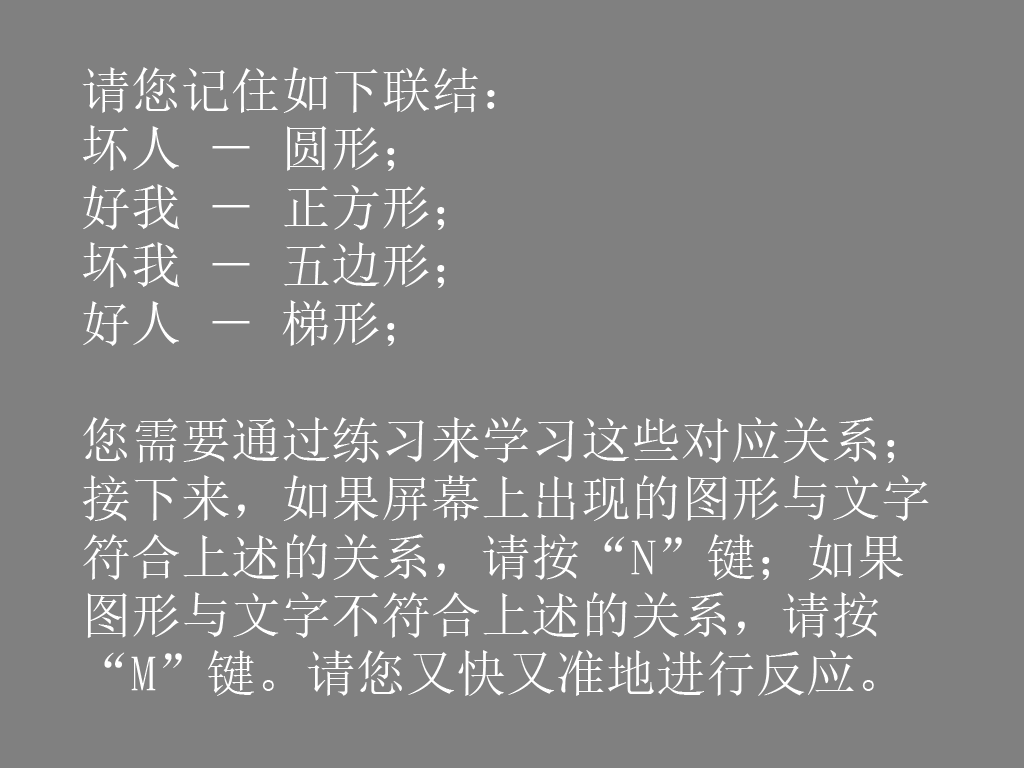
<style>
.page{position:relative;width:1024px;height:768px;background:#808080}
.page>*{position:absolute;margin:0}
.t1{font:50px/58.3px "SimSun";color:#ffffff}
</style>
<div class="page">
<p class="t1" style="left:82px;top:67px;width:847px;height:629px">请您记住如下联结： <br>坏人 － 圆形；<br>好我 － 正方形；<br>坏我 － 五边形；<br>好人 － 梯形；<br><br>您需要通过练习来学习这些对应关系；<br>接下来，如果屏幕上出现的图形与文字<br>符合上述的关系，请按“N”键；如果<br>图形与文字不符合上述的关系，请按<br>“M”键。请您又快又准地进行反应。</p>
</div>
